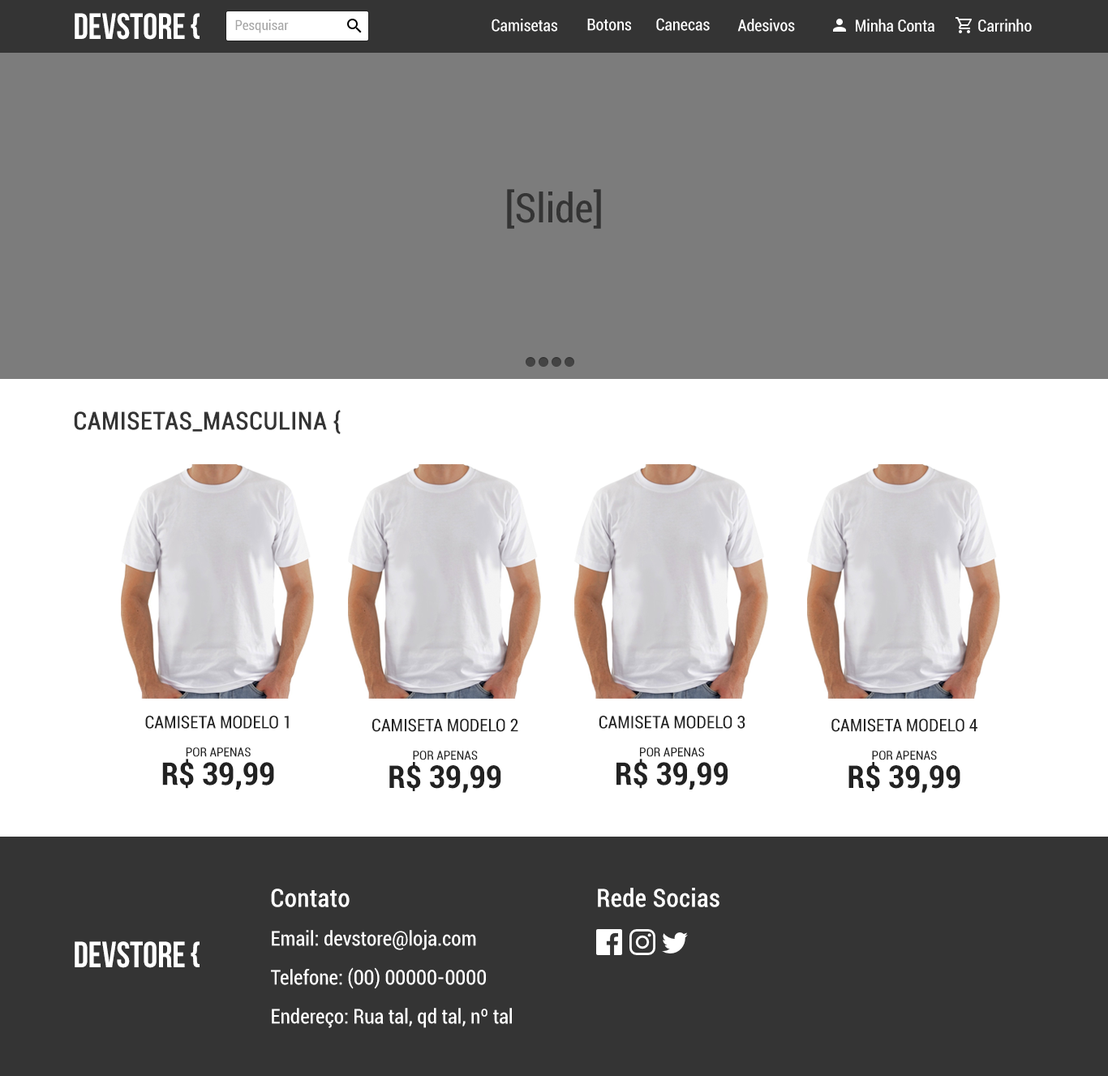
<style>
.page{position:relative;width:1108px;height:1076px;background:#7c7c7c}
.page>*{position:absolute;margin:0}
.t1{font:36.5px "BebasNeue";color:#ffffff;text-transform:uppercase}
.t2{font:16.2px "Roboto-Condensed";color:#ffffff}
.t3{font:13.8px "Roboto-Condensed";color:#a6a6a6}
.t4{font:40.6px "Roboto-Condensed";color:#343434}
.t5{font:24.3px "Roboto-Condensed";color:#343434;font-weight:bold}
.t6{font:17.3px/18.9px "Roboto-Condensed";color:#222222}
.t7{font:12.6px/28.3px "Roboto-Condensed";color:#222222}
.t8{font:31.4px/28.3px "Roboto-BoldCondensed";color:#222222}
.t9{font:20.3px/19.5px "Roboto-Condensed";color:#ffffff}
.t10{font:24.3px/19.5px "Roboto-Condensed";color:#ffffff;font-weight:bold}
.t11{font:24.3px "Roboto-Condensed";color:#ffffff;font-weight:bold}
</style>
<div class="page">
<p class="t1" style="left:75px;top:13px;width:125px;height:27px">DEVSTORE {</p>
<p class="t2" style="left:656px;top:18px;width:54px;height:13px">Canecas</p>
<p class="t3" style="left:235px;top:19px;width:54px;height:14px">Pesquisar</p>
<p class="t2" style="left:492px;top:19px;width:65px;height:13px">Camisetas</p>
<p class="t2" style="left:587px;top:19px;width:44px;height:12px">Botons</p>
<p class="t2" style="left:738px;top:19px;width:57px;height:13px">Adesivos</p>
<p class="t2" style="left:856px;top:19px;width:176px;height:13px">Minha Conta           Carrinho</p>
<p class="t4" style="left:507px;top:189px;width:94px;height:40px">[Slide]</p>
<p class="t5" style="left:74px;top:410px;width:267px;height:24px">CAMISETAS_MASCULINA {</p>
<p class="t6" style="left:145px;top:716px;width:144px;height:73px;text-align:center">CAMISETA MODELO 1<br><span class="t7">POR APENAS<br></span><span class="t8">R$ 39,99</span></p>
<p class="t6" style="left:372px;top:718px;width:146px;height:75px;text-align:center">CAMISETA MODELO 2<br><span class="t7">POR APENAS<br></span><span class="t8">R$ 39,99</span></p>
<p class="t6" style="left:599px;top:716px;width:147px;height:73px;text-align:center">CAMISETA MODELO 3<br><span class="t7">POR APENAS<br></span><span class="t8">R$ 39,99</span></p>
<p class="t6" style="left:832px;top:718px;width:146px;height:75px;text-align:center">CAMISETA MODELO 4<br><span class="t7">POR APENAS<br></span><span class="t8">R$ 39,99</span></p>
<p class="t9" style="left:271px;top:888px;width:241px;height:140px"><span class="t10">Contato<br></span><br>Email: devstore@loja.com<br><br>Telefone: (00) 00000-0000<br><br>Endereço: Rua tal, qd tal, nº tal</p>
<p class="t11" style="left:598px;top:888px;width:122px;height:19px">Rede Socias</p>
<p class="t1" style="left:75px;top:941px;width:125px;height:27px">DEVSTORE {</p>
</div>
